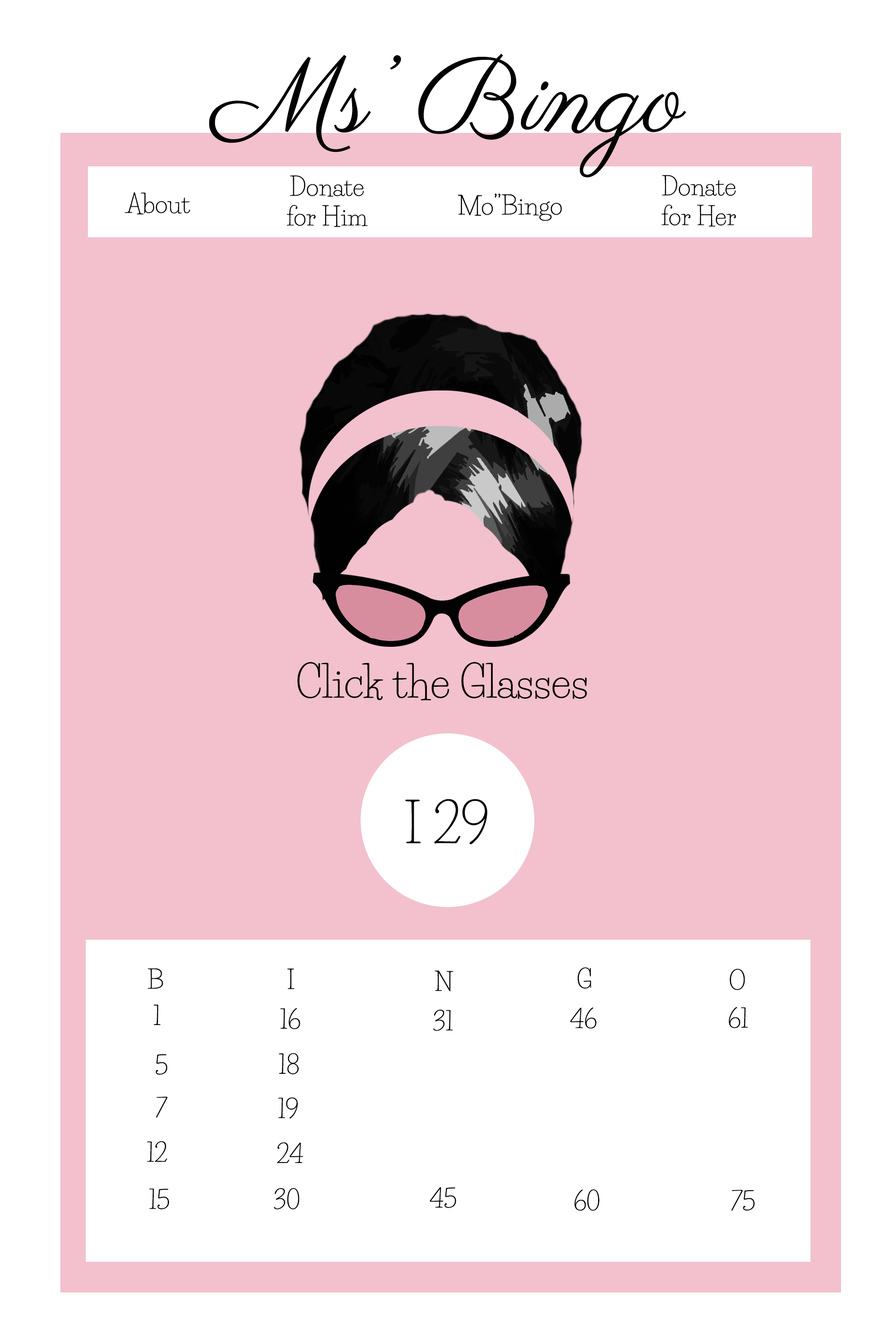
<style>
.page{position:relative;width:892px;height:1337px;background:#ffffff}
.page>*{position:absolute;margin:0}
.t1{font:106.1px "Parisienne-Regular";color:#020202}
.t2{font:24.8px "LifeSavers-Regular";color:#020202}
.t3{font:42.5px "LifeSavers-Regular";color:#020202}
.t4{font:53.1px "LifeSavers-Regular";color:#020202}
</style>
<div class="page">
<p class="t1" style="left:209px;top:53px;width:477px;height:124px">Ms’ Bingo</p>
<p class="t2" style="left:286px;top:175px;width:82px;height:52px;text-align:center">Donate<br>for Him</p>
<p class="t2" style="left:661px;top:175px;width:75px;height:52px;text-align:center">Donate<br>for Her</p>
<p class="t2" style="left:124px;top:192px;width:66px;height:22px">About</p>
<p class="t2" style="left:457px;top:194px;width:105px;height:27px">Mo’’Bingo</p>
<p class="t3" style="left:297px;top:662px;width:290px;height:39px">Click the Glasses</p>
<p class="t4" style="left:405px;top:799px;width:82px;height:46px">I 29</p>
<p class="t2" style="left:148px;top:968px;width:15px;height:21px">B</p>
<p class="t2" style="left:287px;top:969px;width:8px;height:21px">I</p>
<p class="t2" style="left:434px;top:971px;width:19px;height:21px">N</p>
<p class="t2" style="left:577px;top:968px;width:14px;height:21px">G</p>
<p class="t2" style="left:729px;top:969px;width:16px;height:22px">O</p>
<p class="t2" style="left:153px;top:1005px;width:7px;height:20px">1</p>
<p class="t2" style="left:280px;top:1008px;width:20px;height:22px">16</p>
<p class="t2" style="left:433px;top:1010px;width:20px;height:21px">31</p>
<p class="t2" style="left:570px;top:1008px;width:26px;height:21px">46</p>
<p class="t2" style="left:728px;top:1007px;width:20px;height:22px">61</p>
<p class="t2" style="left:155px;top:1054px;width:12px;height:21px">5</p>
<p class="t2" style="left:279px;top:1053px;width:20px;height:22px">18</p>
<p class="t2" style="left:156px;top:1097px;width:12px;height:21px">7</p>
<p class="t2" style="left:278px;top:1098px;width:20px;height:21px">19</p>
<p class="t2" style="left:147px;top:1141px;width:20px;height:21px">12</p>
<p class="t2" style="left:277px;top:1143px;width:26px;height:21px">24</p>
<p class="t2" style="left:149px;top:1189px;width:20px;height:21px">15</p>
<p class="t2" style="left:274px;top:1188px;width:25px;height:22px">30</p>
<p class="t2" style="left:430px;top:1188px;width:26px;height:20px">45</p>
<p class="t2" style="left:574px;top:1190px;width:25px;height:21px">60</p>
<p class="t2" style="left:731px;top:1190px;width:23px;height:21px">75</p>
</div>
